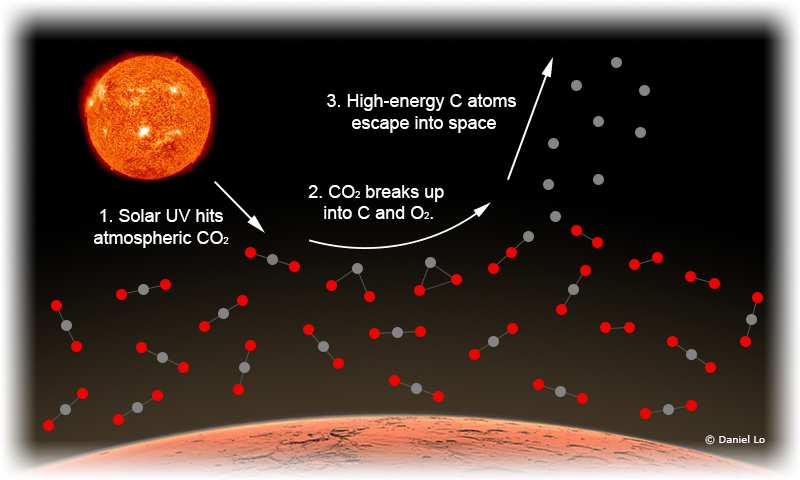
<style>
.page{position:relative;width:800px;height:480px;background:#000000}
.page>*{position:absolute;margin:0}
.t1{font:18px "ArialMT";color:#ffffff}
.t2{font:9px "ArialMT";color:#ffffff}
.t3{font:10px "Verdana";color:#ffffff}
</style>
<div class="page">
<p class="t1" style="left:327px;top:94px;width:189px;height:39px;text-align:center">3. High-energy C atoms <br>escape into space</p>
<p class="t1" style="left:308px;top:185px;width:136px;height:34px;text-align:center">2. CO<span class="t2">2</span> breaks up <br>into C and O<span class="t2">2</span>.</p>
<p class="t1" style="left:94px;top:209px;width:135px;height:39px;text-align:center">1. Solar UV hits<br>atmospheric CO<span class="t2">2</span></p>
<p class="t3" style="left:705px;top:435px;width:60px;height:10px">© Daniel Lo</p>
</div>
